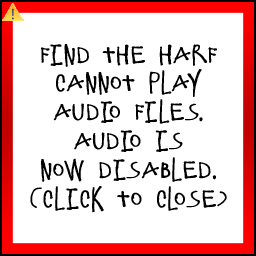
<style>
.page{position:relative;width:256px;height:256px;background:#ffffff}
.page>*{position:absolute;margin:0}
.t1{font:24px "ElliotSix";color:#000000}
</style>
<div class="page">
<p class="t1" style="left:30px;top:44px;width:197px;height:169px;text-align:center">Find the Harf cannot play audio files. Audio is<br>now disabled.<br>(Click to close)</p>
</div>
